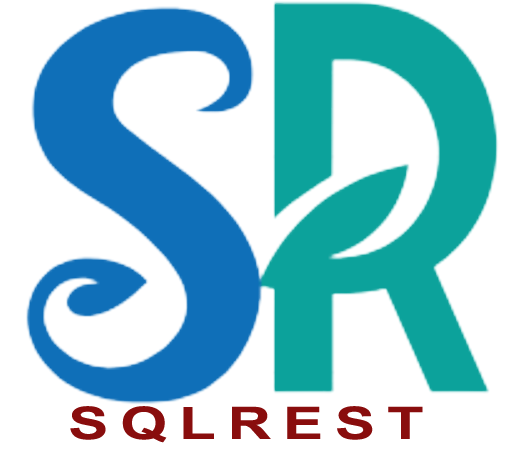
<style>
.page{position:relative;width:531px;height:458px;background:#ffffff}
.page>*{position:absolute;margin:0}
.t1{font:45px "Arial-BoldMT";letter-spacing:0.2em;color:#890d0d;scale:1.33 1}
</style>
<div class="page">
<p class="t1" style="left:70px;top:406px;width:353px;height:37px">SQLREST</p>
</div>
